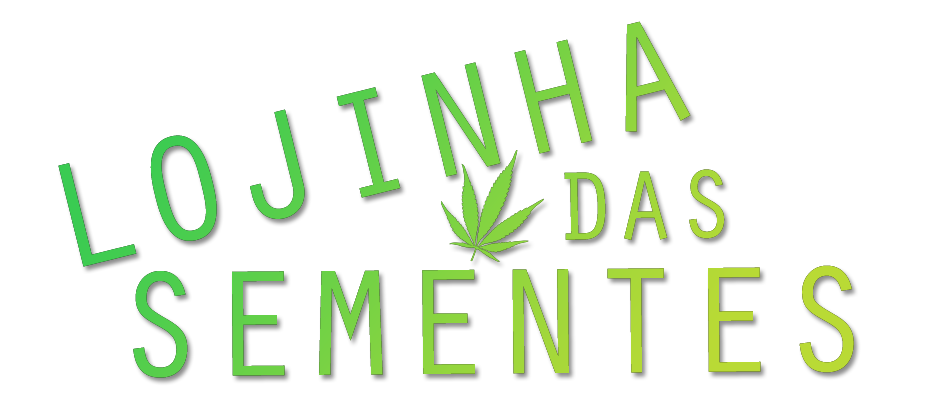
<style>
.page{position:relative;width:927px;height:397px;background:#ffffff}
.page>*{position:absolute;margin:0}
.t1{font:155.3px "OratorStd"}
.t2{font:100px "OratorStd";color:#a0d73b}
</style>
<div class="page">
<p class="t1" style="left:58px;top:21px;width:633px;height:246px;rotate:-14deg">LOJINHA</p>
<p class="t2" style="left:564px;top:169px;width:161px;height:71px;rotate:-1deg">DAS</p>
<p class="t1" style="left:133px;top:265px;width:721px;height:113px">SEMENTES</p>
</div>
